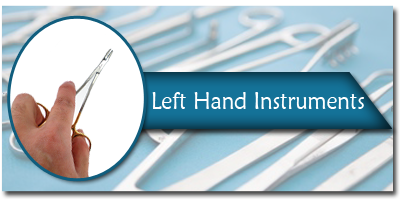
<style>
.page{position:relative;width:400px;height:200px}
.page>*{position:absolute;margin:0}
.t1{font:24px "MaiandraGD-Regular";color:#ffffff;scale:0.92 1}
</style>
<div class="page">
<p class="t1" style="left:152px;top:92px;width:212px;height:17px">Left Hand Instruments</p>
</div>
